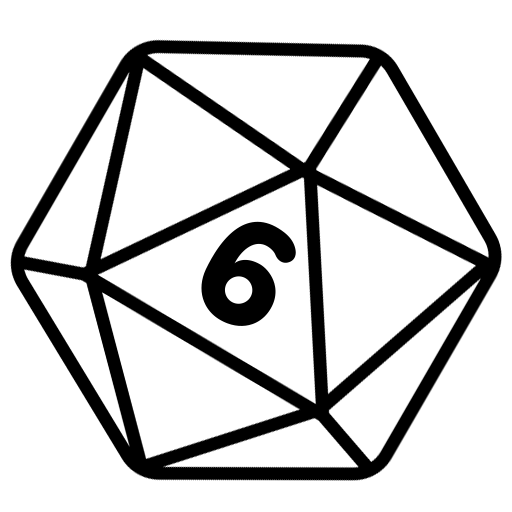
<style>
.page{position:relative;width:512px;height:512px;background:#ffffff}
.page>*{position:absolute;margin:0}
.t1{font:160px "SofiaProSoftBold";color:#000000}
</style>
<div class="page">
<p class="t1" style="left:201px;top:221px;width:95px;height:105px;rotate:30deg">6</p>
</div>
